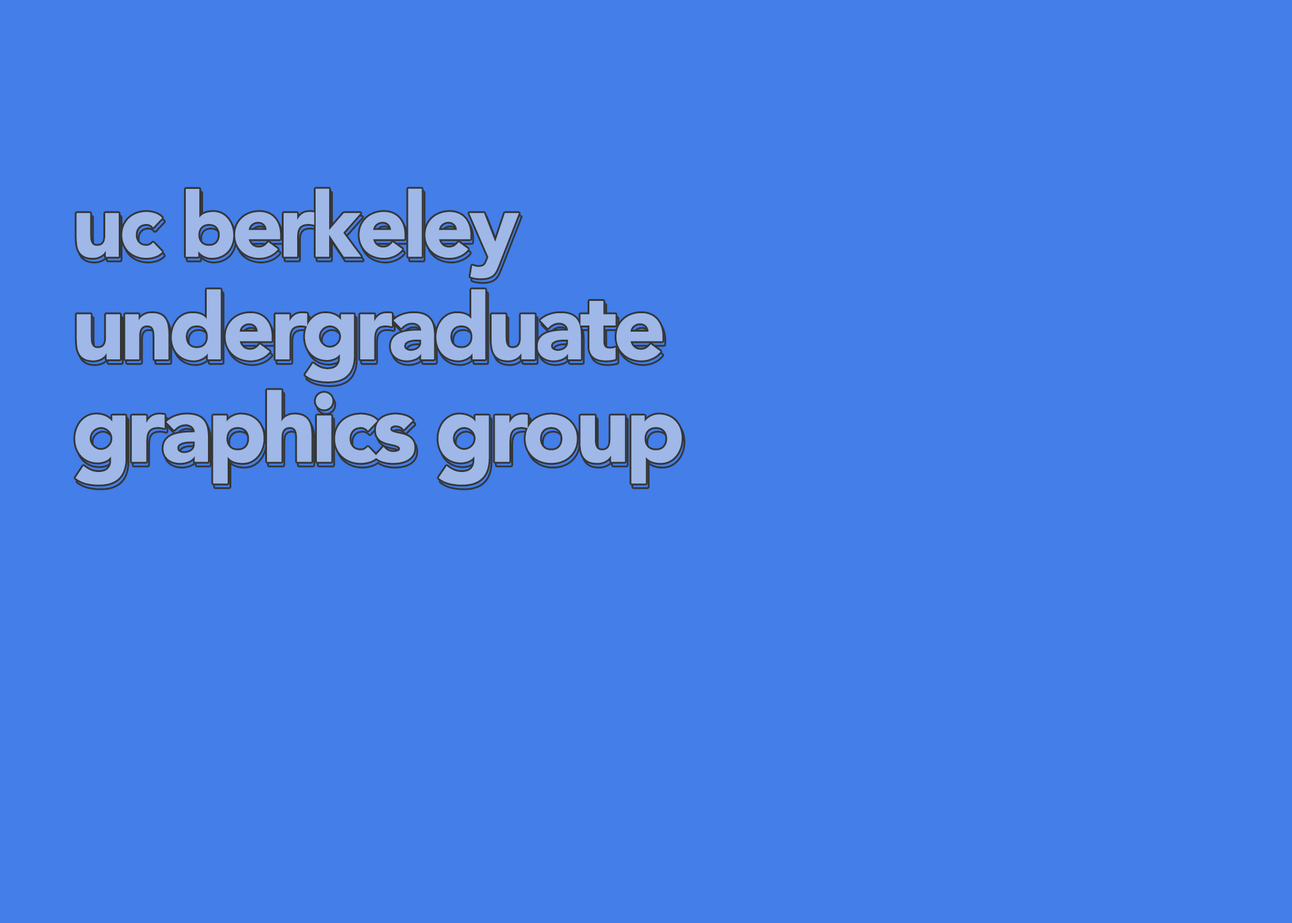
<style>
.page{position:relative;width:1292px;height:923px;background:#437ee9}
.page>*{position:absolute;margin:0}
.t1{font:94.9px/102.5px "Avenir-Black";letter-spacing:-0.05em;color:#9fb8e7}
.t2{font:89.7px/102.5px "Avenir-Black";letter-spacing:-0.05em;color:#9fb8e7}
.t3{font:92.3px/102.5px "Avenir-Black";letter-spacing:-0.05em;color:#9fb8e7}
</style>
<div class="page">
<p class="t1" style="left:75px;top:188px;width:607px;height:297px"><span class="t2">uc berkeley <br></span><span class="t3">undergraduate <br></span>graphics group</p>
<p class="t1" style="left:77px;top:192px;width:607px;height:297px"><span class="t2">uc berkeley <br></span><span class="t3">undergraduate <br></span>graphics group</p>
</div>
